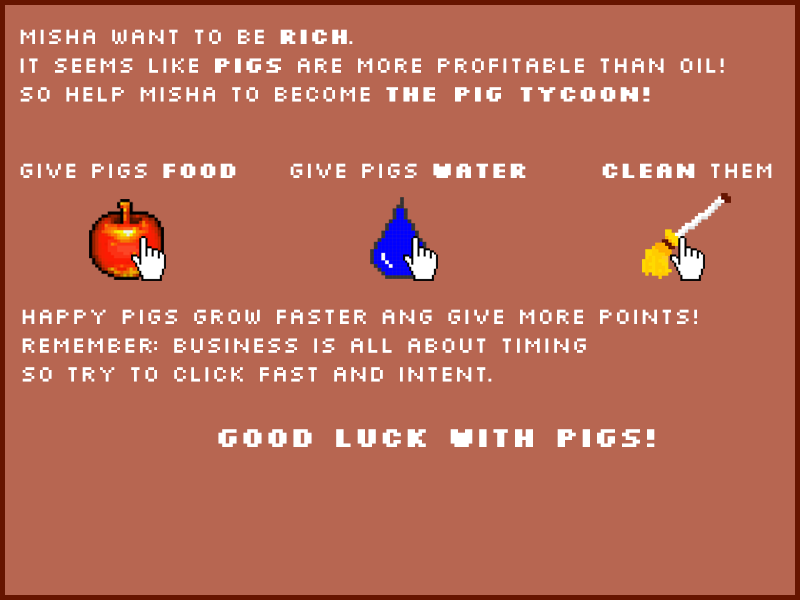
<style>
.page{position:relative;width:800px;height:600px;background:#b76651}
.page>*{position:absolute;margin:0}
.t1{font:24px "Silkscreen";color:#ffffff}
.t2{font:24px "Silkscreen-Bold";color:#ffffff}
.t3{font:30px "Silkscreen-Bold";color:#ffffff}
</style>
<div class="page">
<p class="t1" style="left:20px;top:29px;width:704px;height:73px">Misha want to be <span class="t2">rich</span>.<br>It seems like <span class="t2">pigs</span> are more profitable than oil!<br>so help misha to become <span class="t2">THe pig tycoon!</span></p>
<p class="t1" style="left:20px;top:163px;width:216px;height:15px">Give pigs <span class="t2">food</span></p>
<p class="t1" style="left:290px;top:163px;width:236px;height:15px">Give pigs <span class="t2">water</span></p>
<p class="t2" style="left:602px;top:163px;width:170px;height:15px">clean<span class="t1"> them</span></p>
<p class="t1" style="left:22px;top:309px;width:675px;height:73px">Happy pigs grow faster ang give more points!<br>remember: business is all about timing<br>so try to click fast and intent.</p>
<p class="t3" style="left:218px;top:429px;width:437px;height:18px">GOOD LUCK WITH PIGS!</p>
</div>
